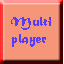
<style>
.page{position:relative;width:64px;height:64px;background:#f69679}
.page>*{position:absolute;margin:0}
.t1{font:14px "MaturaMTScriptCapitals";color:#573cf8}
</style>
<div class="page">
<p class="t1" style="left:11px;top:17px;width:40px;height:30px;text-align:right">Multi<br>player</p>
</div>
